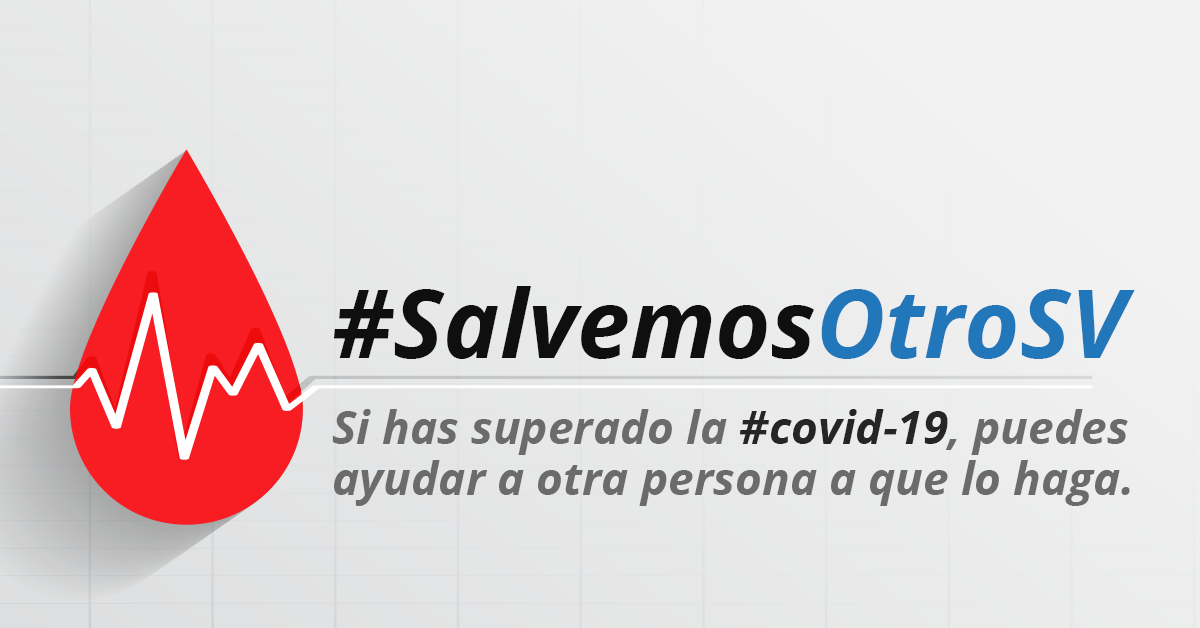
<style>
.page{position:relative;width:1200px;height:628px}
.page>*{position:absolute;margin:0}
.t1{font:95px "OpenSans-BoldItalic";color:#0f0f0f}
.t2{font:95px "OpenSans-BoldItalic";color:#2276ba}
.t3{font:46px/51px "OpenSans-BoldItalic";color:#6b6b6b}
.t4{font:46px/51px "OpenSans-BoldItalic";color:#252525}
</style>
<div class="page">
<p class="t1" style="left:333px;top:286px;width:802px;height:73px">#Salvemos<span class="t2">OtroSV</span></p>
<p class="t3" style="left:332px;top:409px;width:798px;height:97px">Si has superado la <span class="t4">#covid-19</span>, puedes  ayudar a otra persona a que lo haga.</p>
</div>
